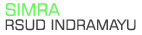
<style>
.page{position:relative;width:142px;height:35px;background:#ffffff}
.page>*{position:absolute;margin:0}
.t1{font:16.9px "Square721BT-Roman";color:#64f755}
.t2{font:14.3px "Square721BT-Roman";color:#434442}
</style>
<div class="page">
<p class="t1" style="left:5px;top:3px;width:55px;height:13px">SIMRA</p>
<p class="t2" style="left:5px;top:19px;width:131px;height:12px">RSUD INDRAMAYU</p>
</div>
